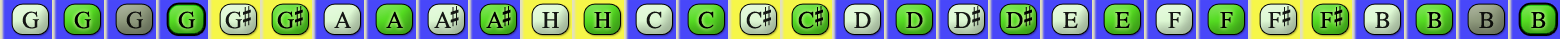
<style>
.page{position:relative;width:1560px;height:39px}
.page>*{position:absolute;margin:0}
.t1{font:24px "OpusChords";letter-spacing:-0.025em;color:#000000}
.t2{font:24px "OpusChords";letter-spacing:-0.1em;color:#000000}
.t3{font:24px "OpusChords";color:#000000}
</style>
<div class="page">
<p class="t1" style="left:225px;top:6px;width:26px;height:23px;opacity:0.9">G#</p>
<p class="t1" style="left:277px;top:6px;width:26px;height:23px">G#</p>
<p class="t2" style="left:434px;top:6px;width:25px;height:22px;opacity:0.9">A#</p>
<p class="t2" style="left:486px;top:6px;width:25px;height:22px">A#</p>
<p class="t3" style="left:746px;top:6px;width:25px;height:23px;opacity:0.9">C#</p>
<p class="t3" style="left:798px;top:6px;width:25px;height:23px">C#</p>
<p class="t1" style="left:954px;top:6px;width:26px;height:22px;opacity:0.9">D#</p>
<p class="t1" style="left:1006px;top:6px;width:26px;height:22px">D#</p>
<p class="t3" style="left:1268px;top:6px;width:23px;height:22px;opacity:0.9">F#</p>
<p class="t3" style="left:1320px;top:6px;width:23px;height:22px">F#</p>
<p class="t3" style="left:22px;top:11px;width:17px;height:18px;opacity:0.9">G</p>
<p class="t3" style="left:74px;top:11px;width:17px;height:18px">G</p>
<p class="t3" style="left:126px;top:11px;width:17px;height:18px;opacity:0.9">G</p>
<p class="t3" style="left:178px;top:11px;width:17px;height:18px">G</p>
<p class="t3" style="left:334px;top:11px;width:17px;height:17px;opacity:0.9">A</p>
<p class="t3" style="left:386px;top:11px;width:17px;height:17px">A</p>
<p class="t3" style="left:542px;top:12px;width:17px;height:16px;opacity:0.9">H</p>
<p class="t3" style="left:594px;top:12px;width:17px;height:16px">H</p>
<p class="t3" style="left:646px;top:11px;width:16px;height:18px;opacity:0.9">C</p>
<p class="t3" style="left:698px;top:11px;width:16px;height:18px">C</p>
<p class="t3" style="left:854px;top:12px;width:17px;height:16px;opacity:0.9">D</p>
<p class="t3" style="left:906px;top:12px;width:17px;height:16px">D</p>
<p class="t3" style="left:1063px;top:12px;width:15px;height:16px;opacity:0.9">E</p>
<p class="t3" style="left:1115px;top:12px;width:15px;height:16px">E</p>
<p class="t3" style="left:1168px;top:12px;width:13px;height:16px;opacity:0.9">F</p>
<p class="t3" style="left:1220px;top:12px;width:13px;height:16px">F</p>
<p class="t3" style="left:1375px;top:12px;width:15px;height:16px;opacity:0.9">B</p>
<p class="t3" style="left:1427px;top:12px;width:15px;height:16px">B</p>
<p class="t3" style="left:1479px;top:12px;width:15px;height:16px;opacity:0.9">B</p>
<p class="t3" style="left:1531px;top:12px;width:15px;height:16px">B</p>
</div>
